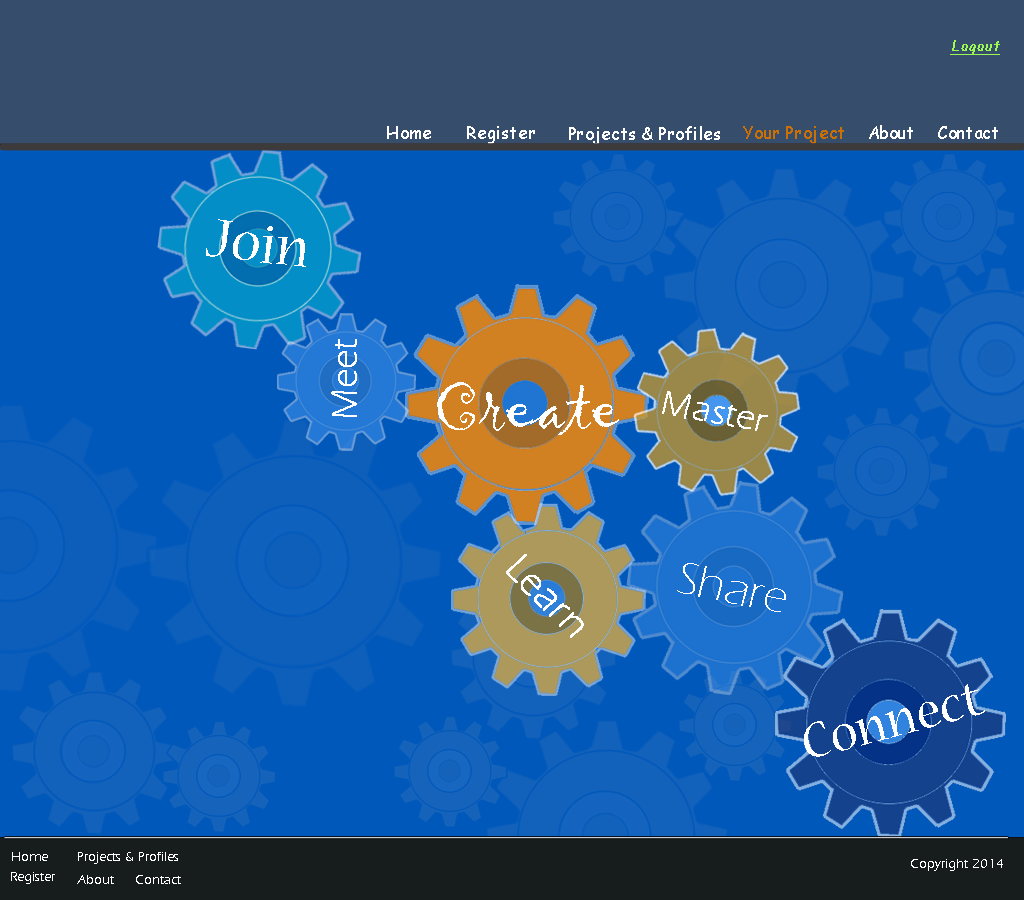
<style>
.page{position:relative;width:1024px;height:900px;background:#0058ba}
.page>*{position:absolute;margin:0}
.t1{font:14px "ComicSansMS";color:#9bf952;font-weight:bold;font-style:italic;text-decoration:underline}
.t2{font:17.3px "ComicSansMS";color:#ffffff}
.t3{font:17.3px "ComicSansMS";color:#cb7004}
.t4{font:60px "NuevaStd-Regular";color:#ffffff}
.t5{font:36px "ErasITC-Light";color:#ffffff;font-weight:bold}
.t6{font:72px "Gigi-Regular";color:#ffffff}
.t7{font:40px "ErasITC-Light";color:#ffffff;font-weight:bold}
.t8{font:48px "ErasITC-Light";color:#ffffff}
.t9{font:55px "NuevaStd-Regular";color:#ffffff}
.t10{font:14px "ErasITC-Light";color:#ffffff}
</style>
<div class="page">
<p class="t1" style="left:950px;top:40px;width:50px;height:15px">Logout</p>
<p class="t2" style="left:387px;top:126px;width:44px;height:13px">Home</p>
<p class="t2" style="left:467px;top:126px;width:68px;height:18px">Register</p>
<p class="t2" style="left:569px;top:126px;width:151px;height:19px">Projects &amp; Profiles</p>
<p class="t3" style="left:743px;top:126px;width:101px;height:18px">Your Project</p>
<p class="t2" style="left:869px;top:125px;width:44px;height:14px">About</p>
<p class="t2" style="left:938px;top:126px;width:60px;height:13px">Contact</p>
<p class="t4" style="left:206px;top:219px;width:100px;height:48px;rotate:7deg">Join</p>
<p class="t5" style="left:331px;top:339px;width:26px;height:78px;rotate:-90deg">Meet</p>
<p class="t6" style="left:437px;top:382px;width:182px;height:53px">Create</p>
<p class="t5" style="left:662px;top:391px;width:106px;height:40px;rotate:10deg">Master</p>
<p class="t7" style="left:506px;top:554px;width:78px;height:84px;rotate:45deg">Learn</p>
<p class="t8" style="left:677px;top:563px;width:109px;height:49px;rotate:11deg">Share</p>
<p class="t9" style="left:804px;top:684px;width:181px;height:73px;rotate:-15deg">Connect</p>
<p class="t10" style="left:12px;top:852px;width:36px;height:9px">Home</p>
<p class="t10" style="left:78px;top:852px;width:100px;height:12px">Projects &amp; Profiles</p>
<p class="t10" style="left:911px;top:859px;width:92px;height:12px">Copyright 2014</p>
<p class="t10" style="left:11px;top:872px;width:44px;height:12px">Register</p>
<p class="t10" style="left:77px;top:875px;width:37px;height:9px">About</p>
<p class="t10" style="left:136px;top:875px;width:45px;height:9px">Contact</p>
</div>
